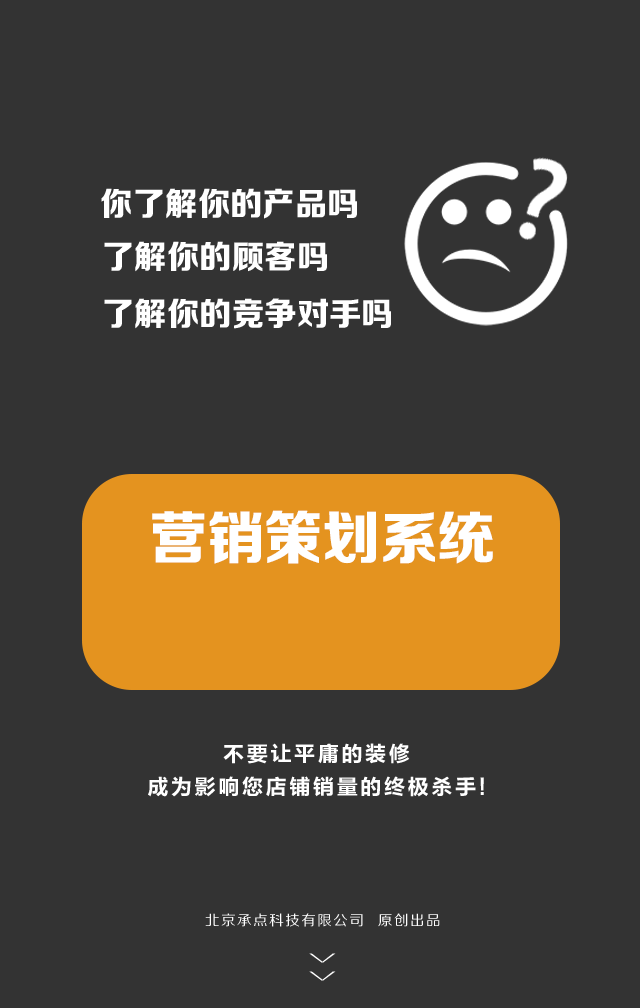
<style>
.page{position:relative;width:640px;height:1008px;background:#333333}
.page>*{position:absolute;margin:0}
.t1{font:32.7px "FZZDHJW--GB1-0";letter-spacing:0.005em;color:#ffffff;text-transform:uppercase}
.t2{font:57.7px "FZZDHJW--GB1-0";letter-spacing:-0.01em;color:#ffffff;text-transform:uppercase}
.t3{font:21.5px/32.2px "FZLTCHK--GBK1-0";letter-spacing:0.1em;color:#ffffff;text-transform:uppercase}
.t4{font:14.2px "FZZHJW--GB1-0";letter-spacing:0.1em;color:#ffffff;text-transform:uppercase}
.t5{font:36.8px "FZZXHJW--GB1-0";letter-spacing:0.5em;color:#ffffff;text-transform:uppercase;scale:0.44 1}
</style>
<div class="page">
<p class="t1" style="left:101px;top:188px;width:256px;height:31px">你了解你的产品吗</p>
<p class="t1" style="left:104px;top:241px;width:223px;height:31px">了解你的顾客吗</p>
<p class="t1" style="left:104px;top:298px;width:287px;height:31px">了解你的竞争对手吗</p>
<p class="t2" style="left:152px;top:510px;width:341px;height:54px">营销策划系统</p>
<p class="t3" style="left:148px;top:743px;width:336px;height:54px;text-align:center">不要让平庸的装修<br>成为影响您店铺销量的终极杀手!</p>
<p class="t4" style="left:205px;top:913px;width:235px;height:14px">北京承点科技有限公司  原创出品</p>
<p class="t5" style="left:309px;top:953px;width:27px;height:28px;rotate:90deg">&gt;&gt;</p>
</div>
